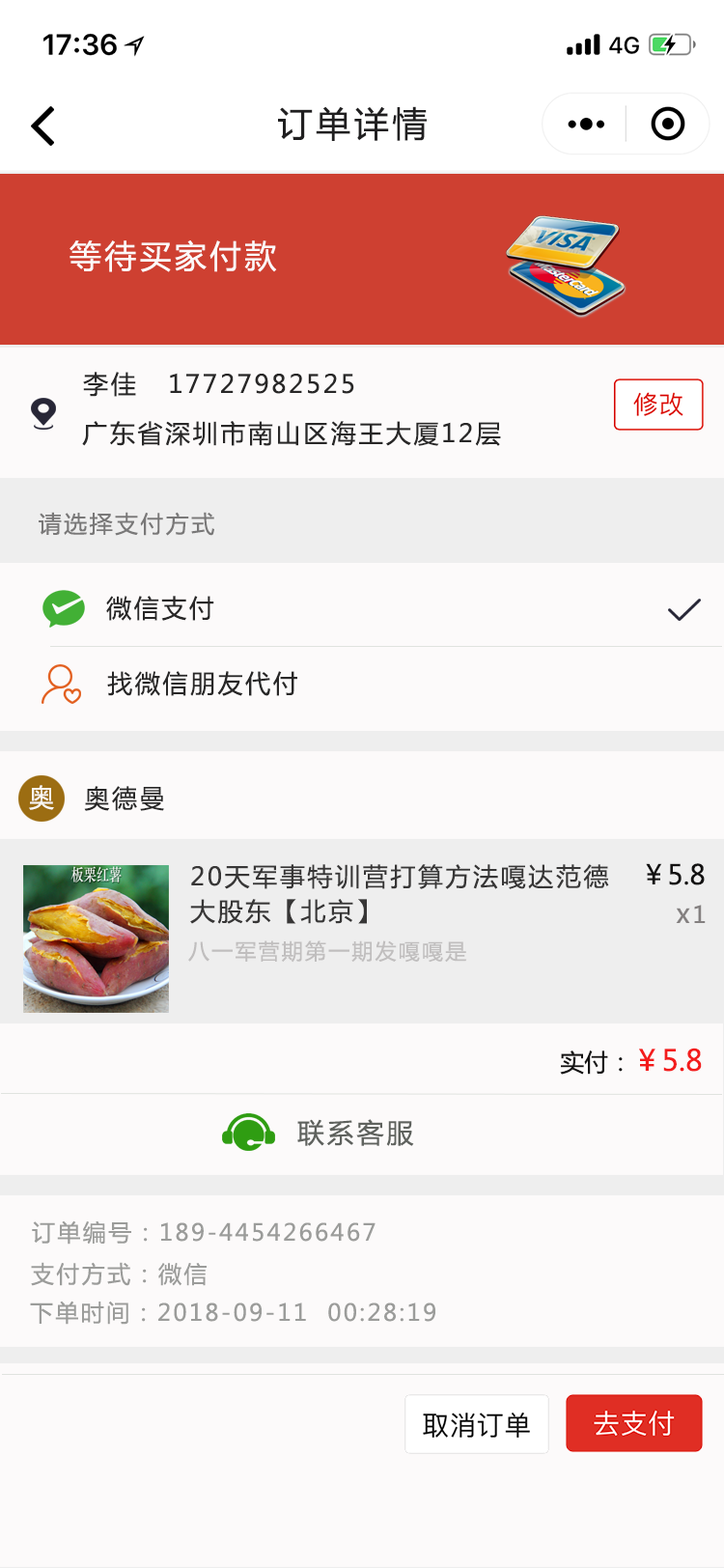
<style>
.page{position:relative;width:724px;height:1568px;background:#fcfafa}
.page>*{position:absolute;margin:0}
.t1{font:34.8px "MicrosoftYaHei";letter-spacing:0.1em;color:#201f20}
.t2{font:31.9px "MicrosoftYaHei";letter-spacing:0.1em;color:#fcf9f9}
.t3{font:25.1px "MicrosoftYaHei";letter-spacing:0.1em;color:#282727}
.t4{font:23.2px "MicrosoftYaHei";letter-spacing:0.1em;color:#797878}
.t5{font:25.1px "MicrosoftYaHei";letter-spacing:0.1em;color:#f9f7f2}
.t6{font:25.1px/34.8px "MicrosoftYaHei";letter-spacing:0.1em;color:#373636}
.t7{font:27px "MicrosoftYaHei";color:#121111}
.t8{font:27px "MicrosoftYaHei";letter-spacing:0.1em;color:#848080}
.t9{font:23.2px "MicrosoftYaHei";letter-spacing:0.1em;color:#848080}
.t10{font:21.2px "MicrosoftYaHei";letter-spacing:0.1em;color:#c0bebe}
.t11{font:29px "MicrosoftYaHei";color:#f31c1c}
.t12{font:24.1px "MicrosoftYaHei";color:#121111}
.t13{font:27px "MicrosoftYaHei";letter-spacing:0.1em;color:#5f625e}
.t14{font:23.2px "MicrosoftYaHei";letter-spacing:0.1em;color:#9b9c9a}
</style>
<div class="page">
<p class="t1" style="left:278px;top:106px;width:149px;height:35px">订单详情</p>
<p class="t2" style="left:70px;top:240px;width:207px;height:32px">等待买家付款</p>
<p class="t3" style="left:83px;top:372px;width:271px;height:25px">李佳   17727982525</p>
<p class="t3" style="left:82px;top:421px;width:419px;height:25px">广东省深圳市南山区海王大厦12层</p>
<p class="t4" style="left:39px;top:512px;width:175px;height:24px">请选择支付方式</p>
<p class="t3" style="left:106px;top:596px;width:108px;height:25px">微信支付</p>
<p class="t3" style="left:107px;top:671px;width:190px;height:25px">找微信朋友代付</p>
<p class="t5" style="left:29px;top:785px;width:25px;height:25px">奥</p>
<p class="t3" style="left:84px;top:786px;width:80px;height:25px">奥德曼</p>
<p class="t6" style="left:190px;top:864px;width:419px;height:60px">20天军事特训营打算方法嘎达范德<br>大股东【北京】</p>
<p class="t7" style="left:646px;top:863px;width:59px;height:22px">￥5.8</p>
<p class="t8" style="left:676px;top:905px;width:30px;height:18px">x<span class="t9">1</span></p>
<p class="t10" style="left:188px;top:940px;width:279px;height:23px">八一军营期第一期发嘎嘎是</p>
<p class="t11" style="left:560px;top:1048px;width:142px;height:27px"><span class="t12">实付：</span>￥5.8</p>
<p class="t13" style="left:297px;top:1119px;width:117px;height:27px">联系客服</p>
<p class="t14" style="left:32px;top:1220px;width:344px;height:25px">订单编号：189-4454266467</p>
<p class="t14" style="left:31px;top:1262px;width:176px;height:24px">支付方式：微信</p>
<p class="t14" style="left:30px;top:1301px;width:405px;height:24px">下单时间：2018-09-11  00:28:19</p>
</div>
